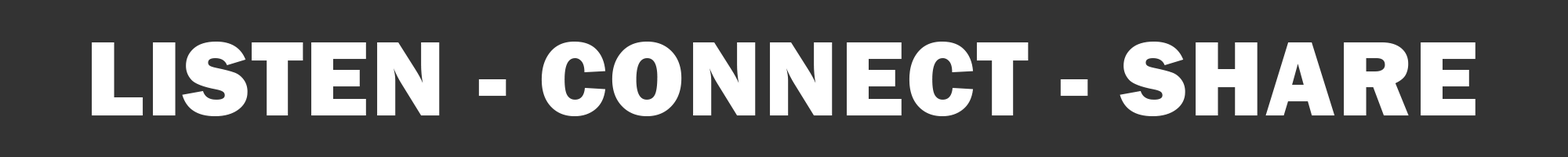
<style>
.page{position:relative;width:1568px;height:157px;background:#333333}
.page>*{position:absolute;margin:0}
.t1{font:108.9px "FranklinGothic-Heavy";letter-spacing:0.02em;color:#ffffff}
</style>
<div class="page">
<p class="t1" style="left:92px;top:42px;width:1383px;height:74px">LISTEN - CONNECT - SHARE</p>
</div>
